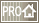
<style>
.page{position:relative;width:39px;height:23px;background:#847b6b}
.page>*{position:absolute;margin:0}
.t1{font:13.5px "ArialMT";color:#ffffff;scale:0.67 1}
</style>
<div class="page">
<p class="t1" style="left:2px;top:6px;width:20px;height:11px">PRO</p>
</div>
